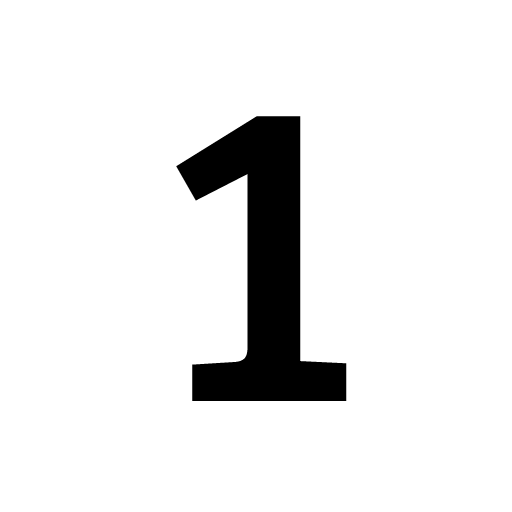
<style>
.page{position:relative;width:512px;height:512px;background:#ffffff}
.page>*{position:absolute;margin:0}
.t1{font:442.3px "BreeSerif-Regular";color:#000000}
</style>
<div class="page">
<p class="t1" style="left:176px;top:116px;width:171px;height:285px">1</p>
</div>
